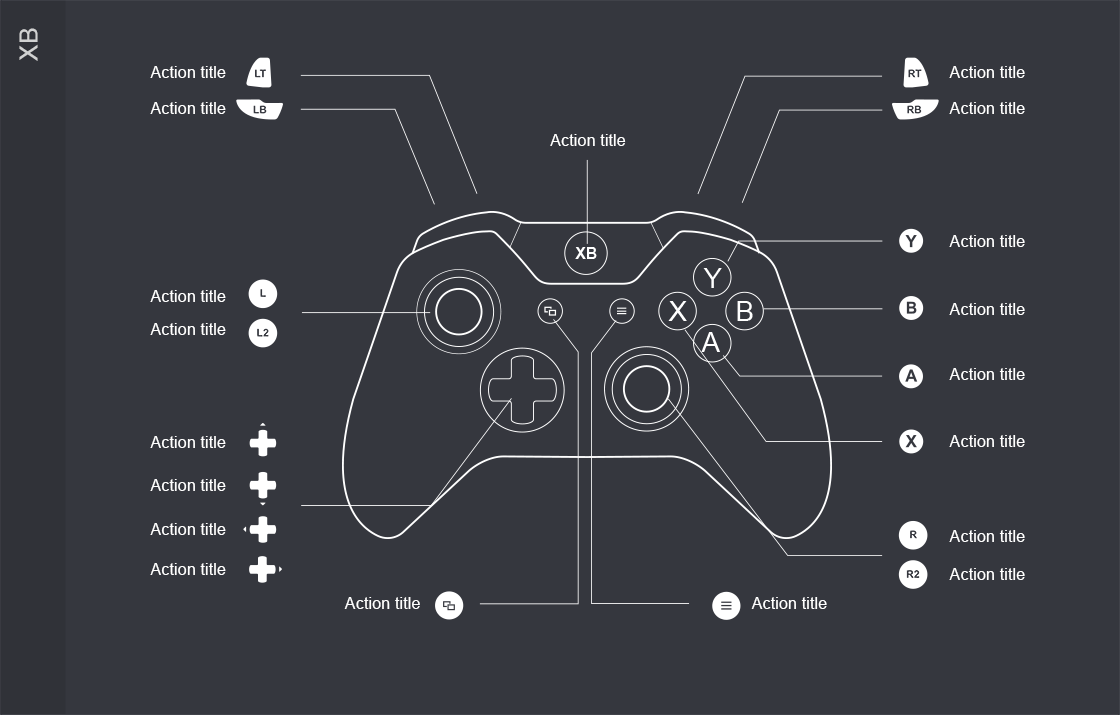
<style>
.page{position:relative;width:1120px;height:715px;background:#35373e}
.page>*{position:absolute;margin:0}
.t1{font:25px "ArialMT";color:#d1d2d2}
.t2{font:16.4px "ArialMT";color:#ffffff}
</style>
<div class="page">
<p class="t1" style="left:19px;top:28px;width:19px;height:33px;rotate:-90deg">XB</p>
<p class="t2" style="left:150px;top:66px;width:76px;height:12px">Action title</p>
<p class="t2" style="left:949px;top:66px;width:76px;height:12px">Action title</p>
<p class="t2" style="left:150px;top:102px;width:76px;height:12px">Action title</p>
<p class="t2" style="left:949px;top:102px;width:76px;height:12px">Action title</p>
<p class="t2" style="left:550px;top:134px;width:76px;height:12px">Action title</p>
<p class="t2" style="left:949px;top:235px;width:76px;height:12px">Action title</p>
<p class="t2" style="left:150px;top:290px;width:76px;height:12px">Action title</p>
<p class="t2" style="left:949px;top:303px;width:76px;height:12px">Action title</p>
<p class="t2" style="left:150px;top:323px;width:76px;height:12px">Action title</p>
<p class="t2" style="left:949px;top:368px;width:76px;height:12px">Action title</p>
<p class="t2" style="left:150px;top:436px;width:76px;height:12px">Action title</p>
<p class="t2" style="left:949px;top:435px;width:76px;height:12px">Action title</p>
<p class="t2" style="left:150px;top:479px;width:76px;height:12px">Action title</p>
<p class="t2" style="left:150px;top:523px;width:76px;height:12px">Action title</p>
<p class="t2" style="left:949px;top:530px;width:76px;height:12px">Action title</p>
<p class="t2" style="left:150px;top:563px;width:76px;height:12px">Action title</p>
<p class="t2" style="left:949px;top:568px;width:76px;height:12px">Action title</p>
<p class="t2" style="left:344px;top:597px;width:76px;height:12px">Action title</p>
<p class="t2" style="left:751px;top:597px;width:76px;height:12px">Action title</p>
</div>
